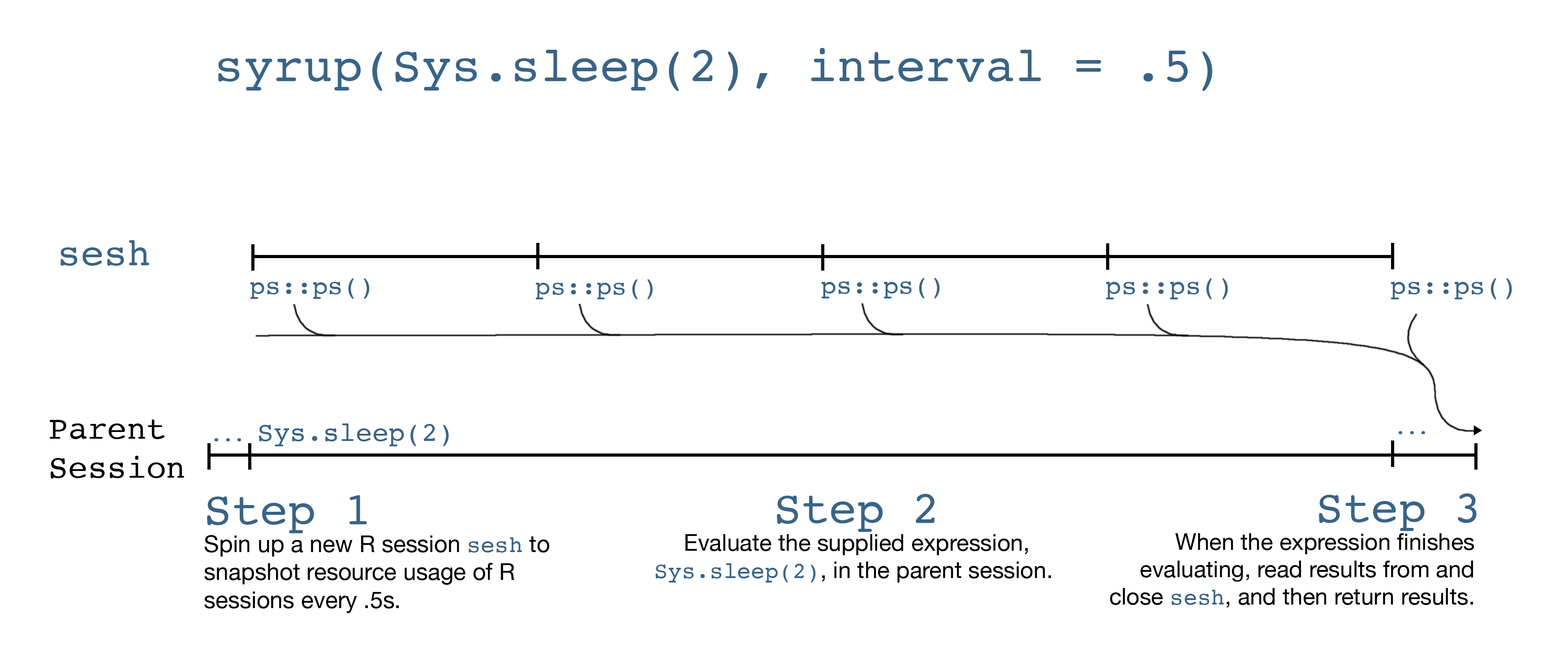
<style>
.page{position:relative;width:1568px;height:665px;background:#ffffff}
.page>*{position:absolute;margin:0}
.t1{font:49.4px "Courier";color:#396486}
.t2{font:38.8px "Courier";color:#396486}
.t3{font:26px "Courier";color:#396486}
.t4{font:25.5px "Courier";color:#396486}
.t5{font:25.8px "Courier";color:#396486}
.t6{font:26.6px "Courier";color:#396486}
.t7{font:26.4px "Courier";color:#396486}
.t8{font:32.6px "Courier";color:#000000}
.t9{font:27.4px "Courier";color:#396486}
.t10{font:19.1px "Courier";color:#396486}
.t11{font:23.3px "HelveticaNeue";color:#000000}
.t12{font:46.5px "Courier";color:#396486}
.t13{font:23.3px "Courier";color:#396486}
.t14{font:23px "HelveticaNeue";color:#000000}
.t15{font:46.1px "Courier";color:#396486}
.t16{font:23px "Courier";color:#396486}
.t17{font:22.9px "HelveticaNeue";color:#000000}
.t18{font:45.9px "Courier";color:#396486}
.t19{font:22.9px "Courier";color:#396486}
</style>
<div class="page">
<p class="t1" style="left:218px;top:48px;width:994px;height:43px">syrup(Sys.sleep(2), interval = .5)</p>
<p class="t2" style="left:60px;top:240px;width:89px;height:26px">sesh</p>
<p class="t3" style="left:250px;top:278px;width:120px;height:21px">ps::ps()</p>
<p class="t4" style="left:535px;top:279px;width:118px;height:20px">ps::ps()</p>
<p class="t5" style="left:821px;top:278px;width:119px;height:20px">ps::ps()</p>
<p class="t6" style="left:1106px;top:278px;width:122px;height:21px">ps::ps()</p>
<p class="t7" style="left:1391px;top:278px;width:121px;height:21px">ps::ps()</p>
<p class="t8" style="left:50px;top:419px;width:134px;height:59px">Parent <br>Session</p>
<p class="t9" style="left:259px;top:423px;width:190px;height:23px">Sys.sleep(2)</p>
<p class="t10" style="left:1398px;top:431px;width:27px;height:3px">...</p>
<p class="t10" style="left:214px;top:438px;width:27px;height:3px">...</p>
<p class="t11" style="left:204px;top:495px;width:345px;height:118px"><span class="t12">Step 1<br></span>Spin up a new R session <span class="t13">sesh</span> to <br>snapshot resource usage of R <br>sessions every .5s.</p>
<p class="t14" style="left:655px;top:494px;width:396px;height:88px;text-align:center"><span class="t15">Step 2<br></span>Evaluate the supplied expression,<br><span class="t16">Sys.sleep(2)</span>, in the parent session.</p>
<p class="t17" style="left:1110px;top:493px;width:367px;height:114px;text-align:right"><span class="t18">Step 3<br></span>When the expression finishes <br>evaluating, read results from and <br>close <span class="t19">sesh</span>, and then return results.</p>
</div>
